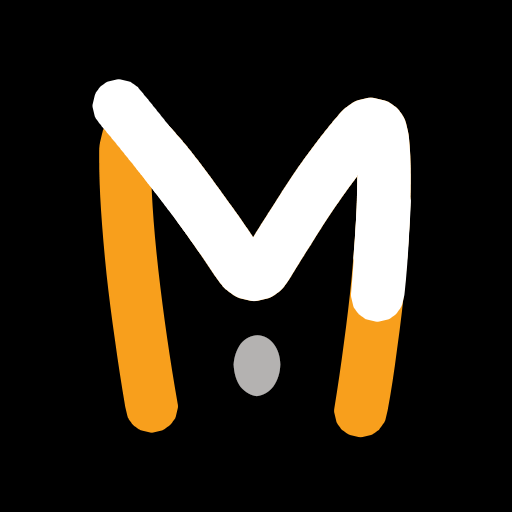
<style>
.page{position:relative;width:512px;height:512px;background:#000000}
.page>*{position:absolute;margin:0}
.t1{font:403.8px "STHeitiSC-Medium";font-weight:bold}
.t2{font:403.8px "STHeitiSC-Medium";color:#ffffff;font-weight:bold}
.t3{font:474.6px "STHeitiSC-Medium";color:#b4b2b1;font-weight:bold;scale:0.77 1}
</style>
<div class="page">
<p class="t1" style="left:117px;top:115px;width:276px;height:305px">M</p>
<p class="t2" style="left:117px;top:115px;width:276px;height:305px">M</p>
<p class="t3" style="left:233px;top:335px;width:48px;height:62px">·</p>
</div>
